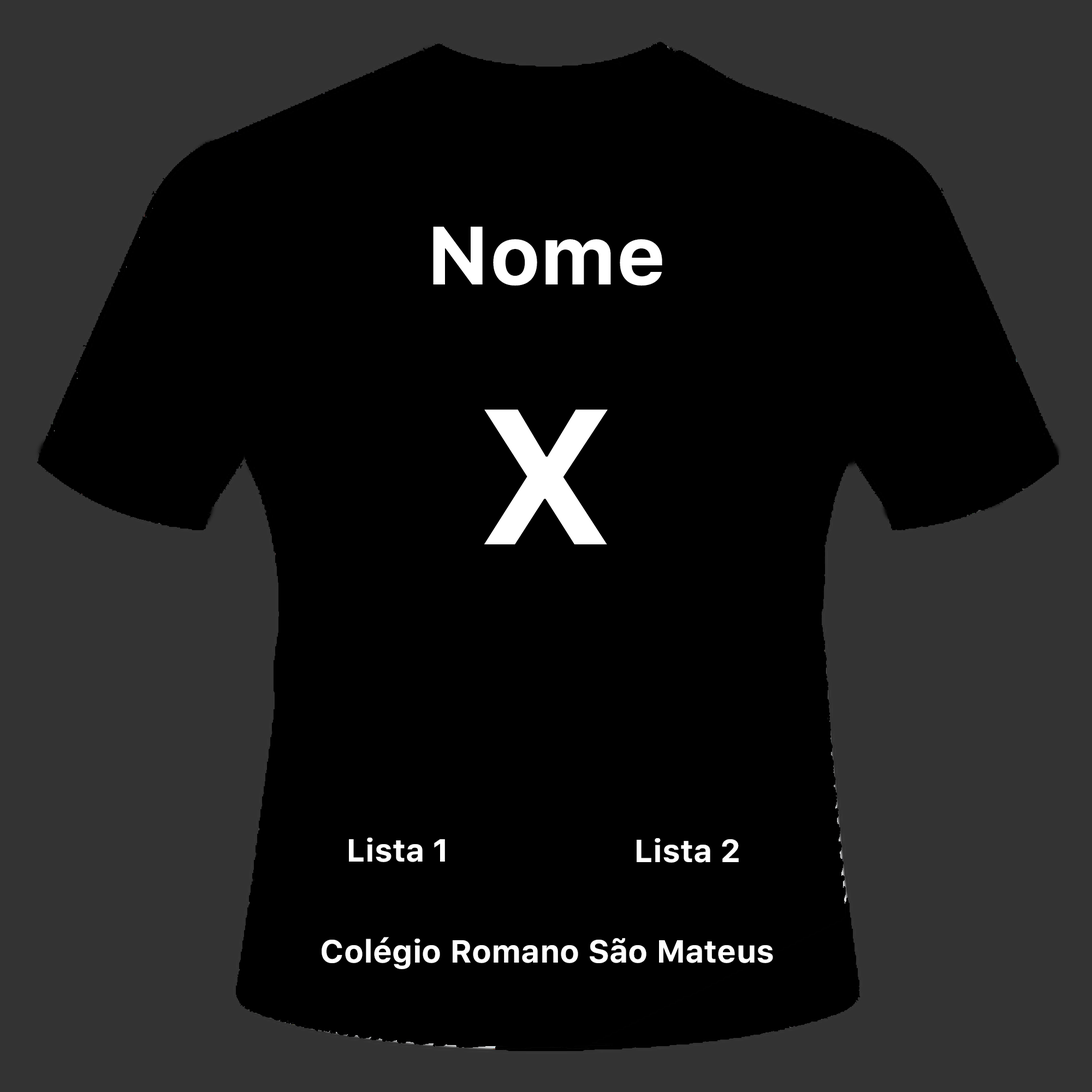
<style>
.page{position:relative;width:1092px;height:1092px;background:#000000}
.page>*{position:absolute;margin:0}
.t1{font:81.9px "Galvji-Bold";color:#ffffff}
.t2{font:191.1px "Galvji-Bold";color:#ffffff}
.t3{font:31.8px "Galvji-Bold";color:#ffffff}
</style>
<div class="page">
<p class="t1" style="left:433px;top:227px;width:229px;height:59px">Nome</p>
<p class="t2" style="left:484px;top:409px;width:124px;height:135px">X</p>
<p class="t3" style="left:349px;top:838px;width:96px;height:24px">Lista 1</p>
<p class="t3" style="left:637px;top:838px;width:102px;height:25px">Lista 2</p>
<p class="t3" style="left:322px;top:937px;width:451px;height:32px">Colégio Romano São Mateus</p>
</div>
